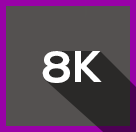
<style>
.page{position:relative;width:136px;height:132px;background:#545150}
.page>*{position:absolute;margin:0}
.t1{font:44px "NexaBold";color:#ffffff}
</style>
<div class="page">
<p class="t1" style="left:42px;top:51px;width:60px;height:32px">8K</p>
</div>
